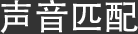
<style>
.page{position:relative;width:138px;height:34px;background:#333333}
.page>*{position:absolute;margin:0}
.t1{font:35.4px "AdobeHeitiStd-Regular";color:#ffffff}
</style>
<div class="page">
<p class="t1" style="left:0px;top:0px;width:138px;height:34px">声音匹配</p>
</div>
